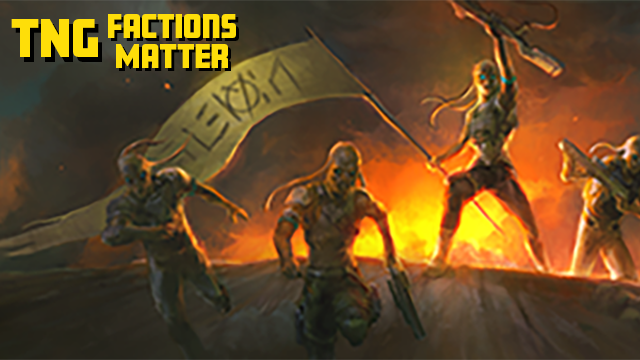
<style>
.page{position:relative;width:640px;height:360px}
.page>*{position:absolute;margin:0}
.t1{font:30px/30px "Amboy-Black";color:#fede09}
.t2{font:30px/30px "Amboy-Black"}
.t3{font:48px "Amboy-Black";color:#fede09}
.t4{font:48px "Amboy-Black"}
</style>
<div class="page">
<p class="t1" style="left:108px;top:14px;width:128px;height:54px;text-align:center">Factions <br>Matter</p>
<p class="t2" style="left:111px;top:17px;width:128px;height:54px;text-align:center">Factions <br>Matter</p>
<p class="t3" style="left:11px;top:19px;width:87px;height:38px">TNG</p>
<p class="t4" style="left:15px;top:24px;width:87px;height:38px">TNG</p>
</div>
